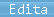
<style>
.page{position:relative;width:54px;height:17px}
.page>*{position:absolute;margin:0}
.t1{font:14.4px "Consolas";color:#ffffff}
</style>
<div class="page">
<p class="t1" style="left:10px;top:4px;width:37px;height:10px">Edita</p>
</div>
